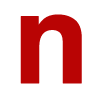
<style>
.page{position:relative;width:100px;height:100px;background:#ffffff}
.page>*{position:absolute;margin:0}
.t1{font:125px "Helvetica-Bold";color:#b90404;font-weight:bold}
</style>
<div class="page">
<p class="t1" style="left:20px;top:14px;width:62px;height:70px">n</p>
</div>
